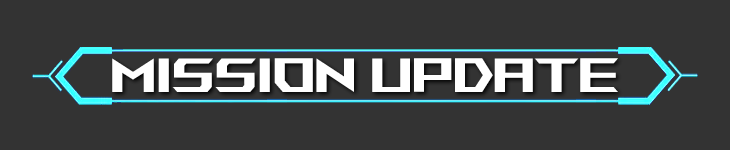
<style>
.page{position:relative;width:730px;height:150px;background:#333333}
.page>*{position:absolute;margin:0}
.t1{font:48px "ROGFonts-Regular";color:#ffffff}
</style>
<div class="page">
<p class="t1" style="left:112px;top:58px;width:506px;height:34px">mission UPDATE</p>
</div>
